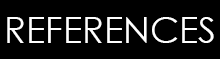
<style>
.page{position:relative;width:220px;height:59px;background:#000000}
.page>*{position:absolute;margin:0}
.t1{font:36px "CenturyGothic";color:#ffffff}
</style>
<div class="page">
<p class="t1" style="left:7px;top:17px;width:207px;height:26px">REFERENCESCCES</p>
</div>
